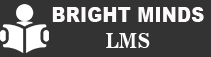
<style>
.page{position:relative;width:211px;height:57px;background:#333333}
.page>*{position:absolute;margin:0}
.t1{font:21.3px "Arial-Black";color:#fdfafb;scale:0.86 1}
.t2{font:21.3px "News701BT-BoldA";color:#fdfafb;scale:0.86 1}
</style>
<div class="page">
<p class="t1" style="left:52px;top:7px;width:152px;height:41px;text-align:center">BRIGHT MINDS<br><span class="t2">LMS</span></p>
</div>
